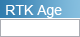
<style>
.page{position:relative;width:80px;height:37px;background:#ffffff}
.page>*{position:absolute;margin:0}
.t1{font:14px "ArialMT";color:#ffffff}
</style>
<div class="page">
<p class="t1" style="left:6px;top:5px;width:56px;height:13px">RTK Age</p>
</div>
